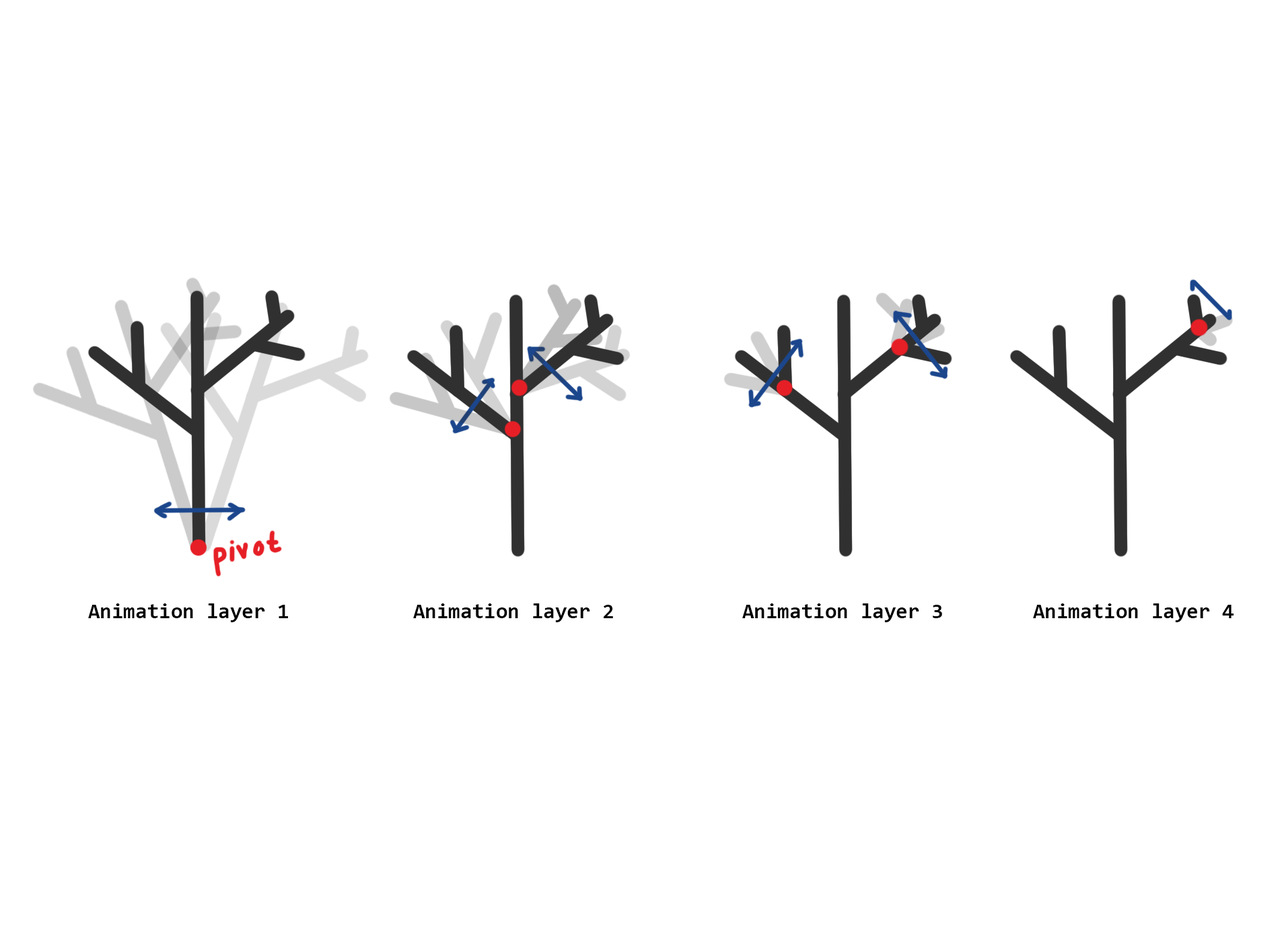
<style>
.page{position:relative;width:1284px;height:929px;background:#ffffff}
.page>*{position:absolute;margin:0}
.t1{font:21.5px "Consolas-Bold";color:#000000}
</style>
<div class="page">
<p class="t1" style="left:88px;top:603px;width:200px;height:19px">Animation layer 1</p>
<p class="t1" style="left:413px;top:603px;width:200px;height:19px">Animation layer 2</p>
<p class="t1" style="left:742px;top:603px;width:200px;height:19px">Animation layer 3</p>
<p class="t1" style="left:1033px;top:603px;width:200px;height:19px">Animation layer 4</p>
</div>
